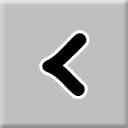
<style>
.page{position:relative;width:128px;height:128px;background:#bfbfbf}
.page>*{position:absolute;margin:0}
.t1{font:148px "ComicSansMS";color:#000000}
</style>
<div class="page">
<p class="t1" style="left:42px;top:33px;width:45px;height:63px">&lt;</p>
</div>
